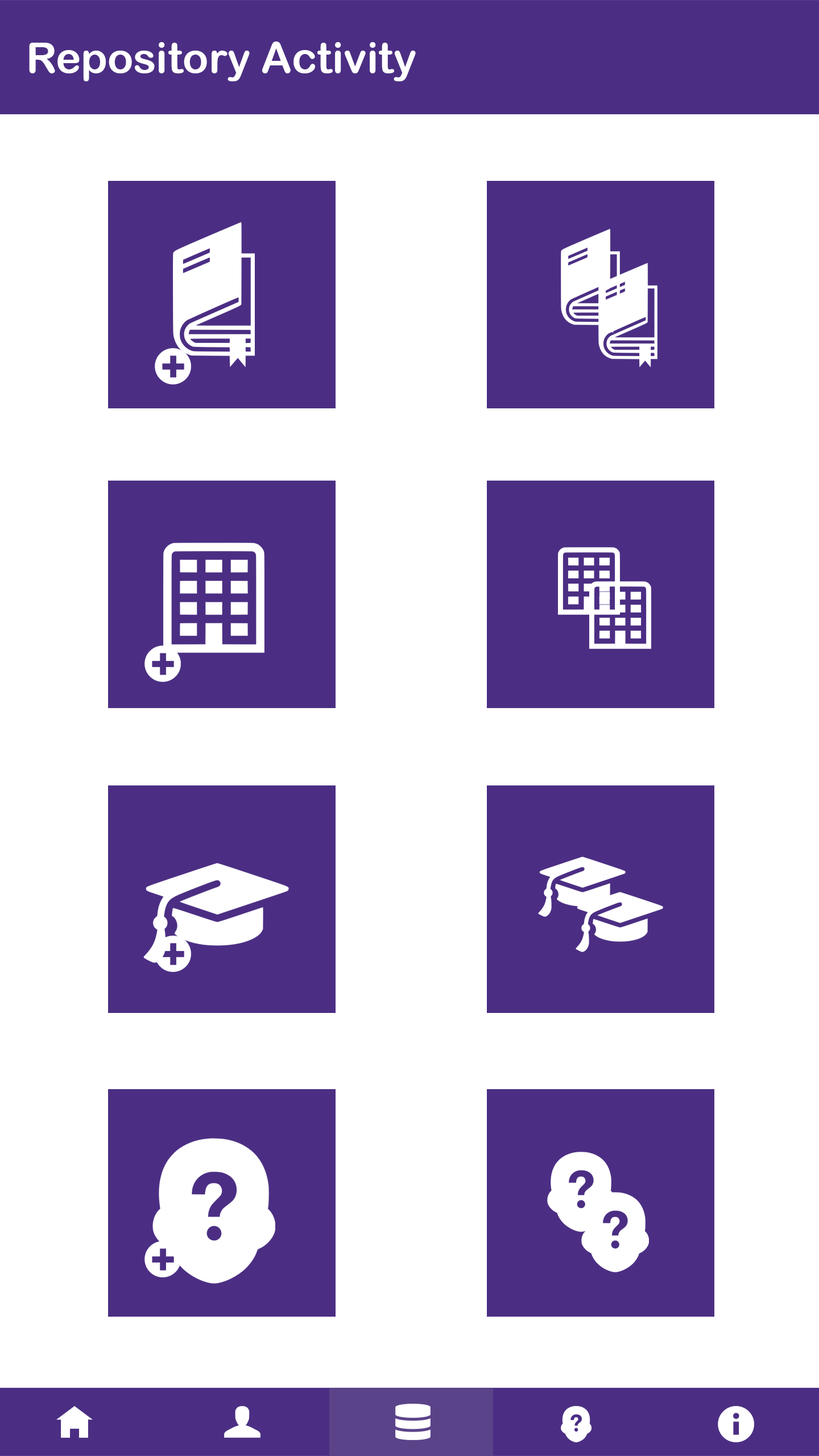
<style>
.page{position:relative;width:819px;height:1456px;background:#ffffff}
.page>*{position:absolute;margin:0}
.t1{font:42.7px "ArialRoundedMTBold";color:#ffffff}
</style>
<div class="page">
<p class="t1" style="left:29px;top:42px;width:387px;height:39px">Repository Activity</p>
</div>
